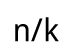
<style>
.page{position:relative;width:70px;height:55px;background:#ffffff}
.page>*{position:absolute;margin:0}
.t1{font:31.8px "DroidSans";color:#000000}
</style>
<div class="page">
<p class="t1" style="left:15px;top:17px;width:44px;height:25px">n/k</p>
</div>
